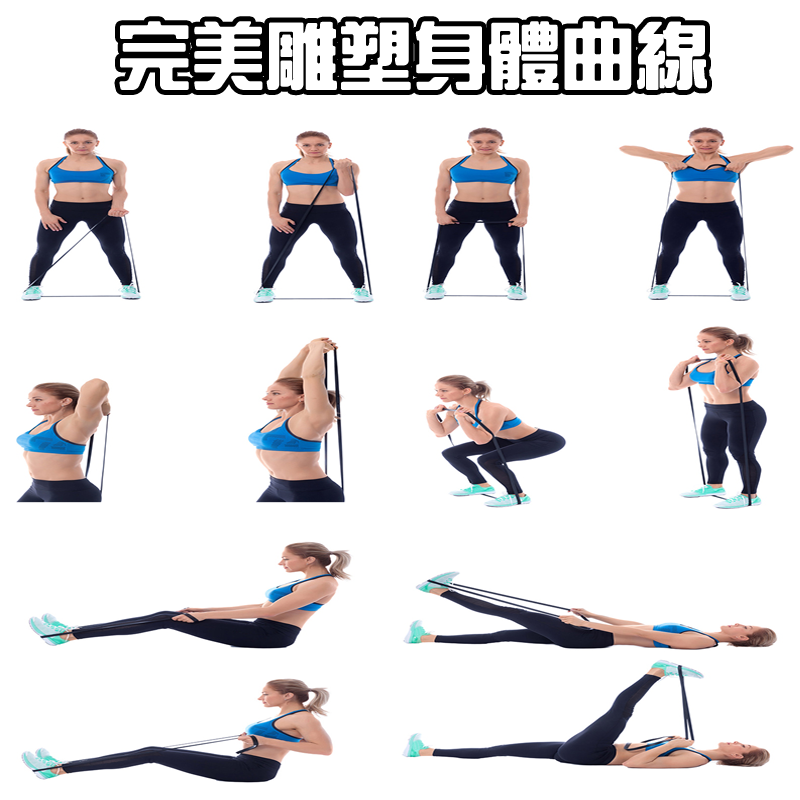
<style>
.page{position:relative;width:800px;height:800px;background:#ffffff}
.page>*{position:absolute;margin:0}
.t1{font:72px "HanWangZonYi";color:#ffffff;font-weight:bold}
</style>
<div class="page">
<p class="t1" style="left:119px;top:21px;width:588px;height:70px">完美雕塑身體曲線</p>
</div>
